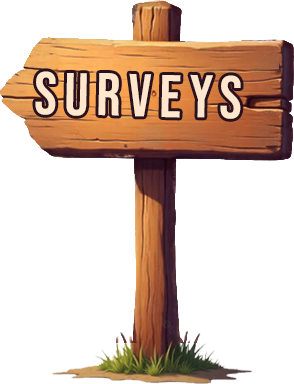
<style>
.page{position:relative;width:294px;height:384px;background:#ffffff}
.page>*{position:absolute;margin:0}
.t1{font:60.2px "BebasNeue-Regular";letter-spacing:0.13em;color:#ffe6cd}
</style>
<div class="page">
<p class="t1" style="left:35px;top:71px;width:206px;height:48px;rotate:1deg">surveys</p>
</div>
